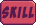
<style>
.page{position:relative;width:36px;height:25px;background:#d34d62}
.page>*{position:absolute;margin:0}
.t1{font:15.5px "BadaBoomBB";letter-spacing:0.08em;color:#561b4c;font-weight:bold;scale:0.92 1}
</style>
<div class="page">
<p class="t1" style="left:2px;top:6px;width:32px;height:13px">Skill</p>
</div>
